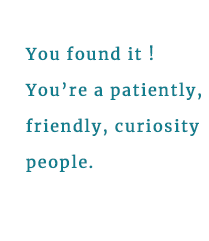
<style>
.page{position:relative;width:209px;height:241px;background:#ffffff}
.page>*{position:absolute;margin:0}
.t1{font:16px/36px "Merriweather-Regular";letter-spacing:0.08em;color:#127e8e;font-weight:bold}
</style>
<div class="page">
<p class="t1" style="left:25px;top:45px;width:176px;height:127px">You found it !<br>You’re a patiently,<br>friendly, curiosity <br>people.</p>
</div>
